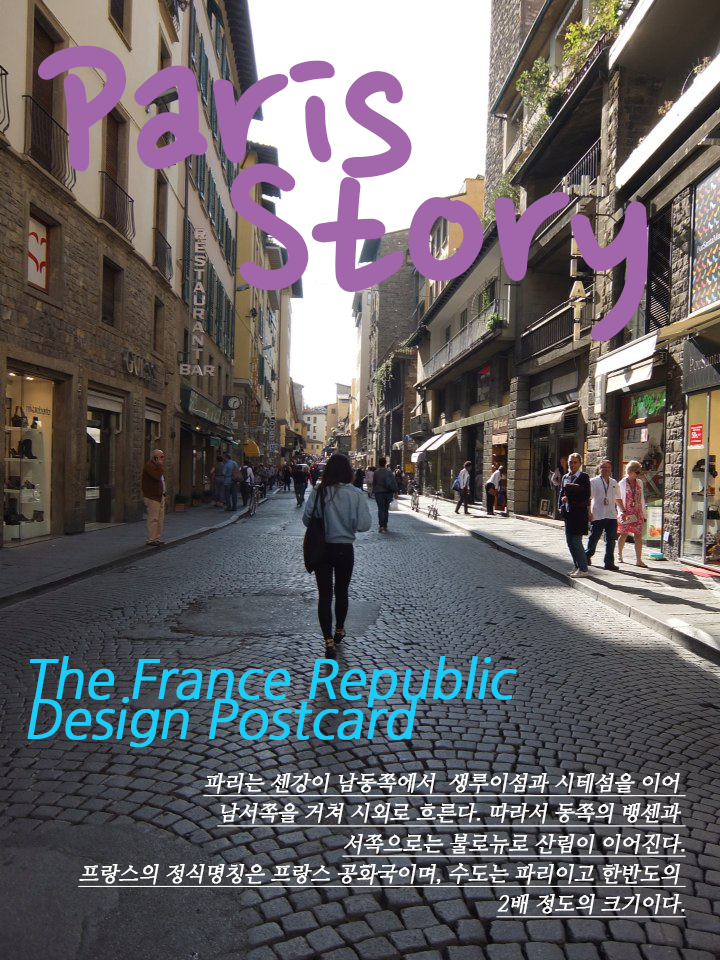
<style>
.page{position:relative;width:720px;height:960px}
.page>*{position:absolute;margin:0}
.t1{font:53px/40px "NanumGothic";letter-spacing:-0.02em;color:#1ccdf9;font-weight:bold;font-style:italic}
.t2{font:21.1px/30.3px "NanumMyeongjo";letter-spacing:-0.02em;color:#ffffff;font-weight:bold;font-style:italic;text-decoration:underline}
</style>
<div class="page">
<p class="t1" style="left:27px;top:656px;width:490px;height:92px">The France Republic<br>Design Postcard</p>
<p class="t2" style="left:78px;top:773px;width:608px;height:145px;text-align:right">파리는 센강이 남동쪽에서  생루이섬과 시테섬을 이어 <br>남서쪽을 거쳐 시외로 흐른다. 따라서 동쪽의 뱅센과 <br>서쪽으로는 불로뉴로 산림이 이어진다.<br>프랑스의 정식명칭은 프랑스 공화국이며, 수도는 파리이고 한반도의 <br>2배 정도의 크기이다.</p>
</div>
